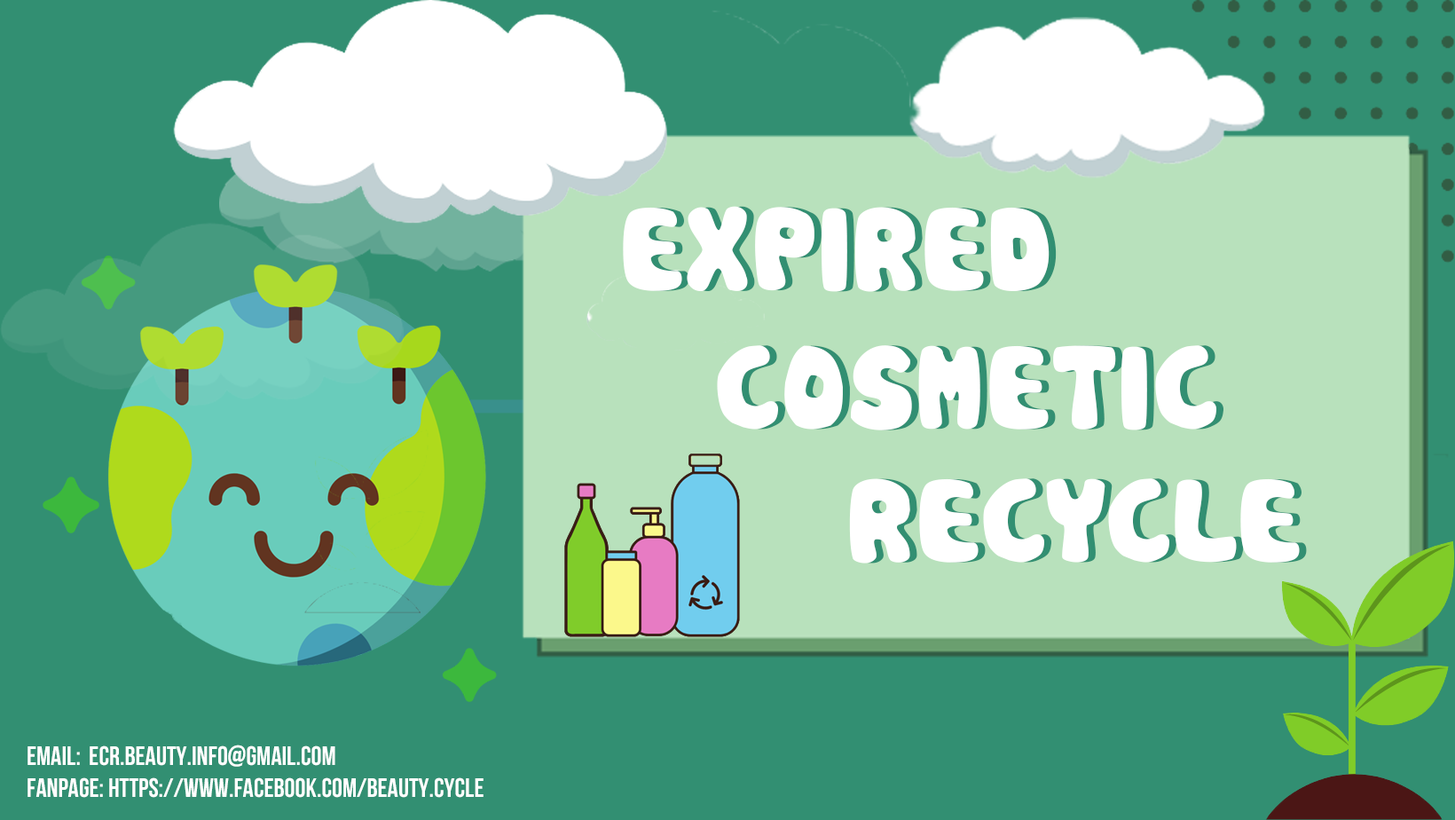
<style>
.page{position:relative;width:1455px;height:820px;background:#328f72}
.page>*{position:absolute;margin:0}
.t1{font:115.3px "UTM-Cookies";color:#ffffff}
.t2{font:26.6px "UTM-Bebas";color:#ffffff}
</style>
<div class="page">
<p class="t1" style="left:623px;top:206px;width:593px;height:224px">EXPIRED <br>   COSMETIC</p>
<p class="t1" style="left:630px;top:206px;width:593px;height:224px">EXPIRED <br>   COSMETIC</p>
<p class="t1" style="left:849px;top:478px;width:451px;height:85px">RECYCLE</p>
<p class="t2" style="left:27px;top:744px;width:456px;height:53px">email:  ECR.beauty.inFO@gmail.com<br>FanPage: https://WWW.FACEBOOK.COM/BEAUTY.CYCLE</p>
</div>
